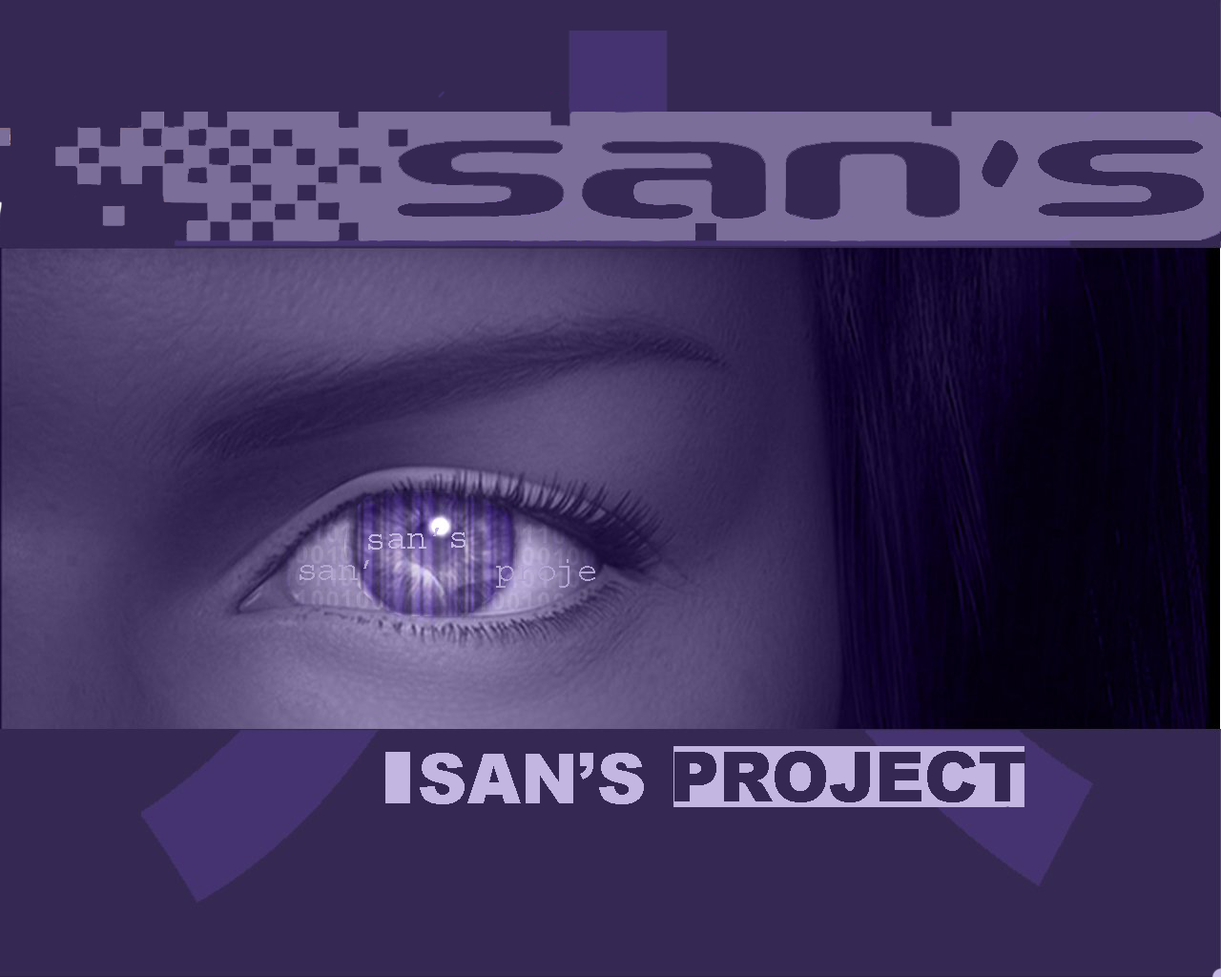
<style>
.page{position:relative;width:1221px;height:977px;background:#352853}
.page>*{position:absolute;margin:0}
.t1{font:34.3px "Courier";color:#c3b6e1}
.t2{font:34.3px "Courier";color:#b3a7cf}
.t3{font:34.3px "Courier";color:#b2a4d2}
.t4{font:68.7px "Arial-Black";color:#352853}
</style>
<div class="page">
<p class="t1" style="left:368px;top:527px;width:97px;height:22px;rotate:-1deg">san’s</p>
<p class="t2" style="left:299px;top:560px;width:70px;height:20px">san’</p>
<p class="t3" style="left:496px;top:559px;width:99px;height:29px">proje</p>
<p class="t4" style="left:674px;top:751px;width:351px;height:51px">PROJECT</p>
</div>
